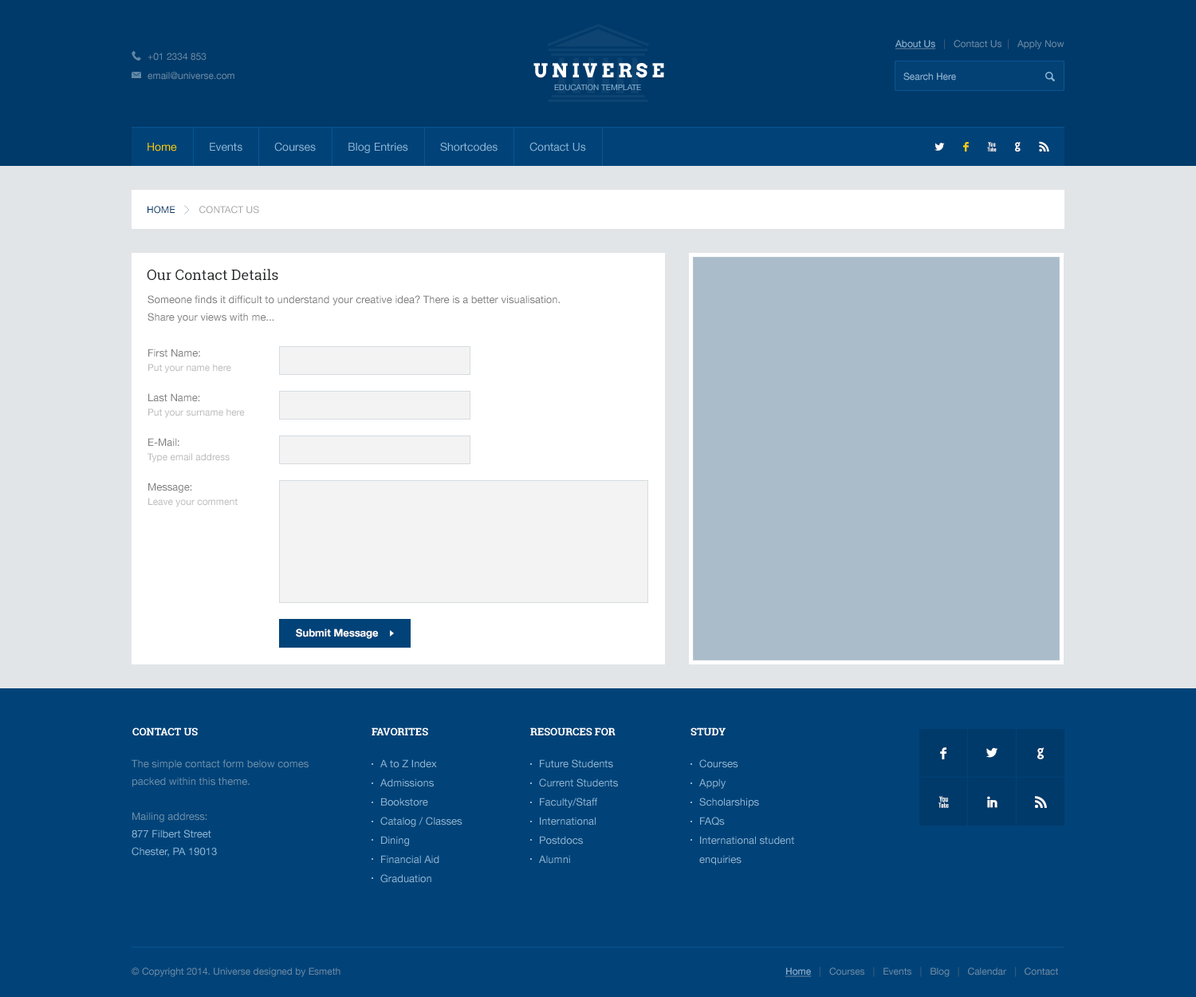
<style>
.page{position:relative;width:1196px;height:997px;background:#014379}
.page>*{position:absolute;margin:0}
.t1{font:9.6px "HelveticaNeue";color:#6289a7}
.t2{font:9.6px "HelveticaNeue";color:#8ab5d6;text-decoration:underline}
.t3{font:9.6px "HelveticaNeue";color:#44647c}
.t4{font:19.1px "Arvo-Bold";letter-spacing:0.2em;color:#ffffff}
.t5{font:9.6px "HelveticaNeue";color:#8ab5d6}
.t6{font:8px "HelveticaNeue";color:#8ab5d6}
.t7{font:11.2px "HelveticaNeue";color:#fecd0b}
.t8{font:11.2px "HelveticaNeue";color:#8ab5d6}
.t9{font:15.9px "Socialico";letter-spacing:1.1em;color:#ffffff}
.t10{font:15.9px "Socialico";letter-spacing:1.1em;color:#fecd0b}
.t11{font:9.6px "HelveticaNeue";color:#aaaaaa}
.t12{font:9.6px "HelveticaNeue";color:#003a6a}
.t13{font:14.4px "RobotoSlab-Regular";color:#282a2c}
.t14{font:10.4px/17.5px "HelveticaNeue";color:#808080}
.t15{font:9.6px/14.4px "HelveticaNeue";color:#bcbcbc}
.t16{font:10.4px/14.4px "HelveticaNeue";color:#808080}
.t17{font:10.4px "HelveticaNeue-Bold";color:#ffffff}
.t18{font:10.4px "RobotoSlab-Bold";color:#ffffff;text-transform:uppercase}
.t19{font:19.1px "Socialico";color:#ffffff;text-transform:uppercase}
.t20{font:10.4px/17.5px "HelveticaNeue";color:#6b90ad}
.t21{font:10.4px/17.5px "HelveticaNeue";color:#8ab5d6}
.t22{font:10.4px/19.1px "HelveticaNeue";color:#8ab5d6}
</style>
<div class="page">
<p class="t1" style="left:896px;top:39px;width:169px;height:10px"><span class="t2">About Us  </span><span class="t3"> |   </span>Contact Us <span class="t3"> | </span>  Apply Now</p>
<p class="t1" style="left:148px;top:53px;width:59px;height:8px">+01 2334 853</p>
<p class="t4" style="left:534px;top:63px;width:130px;height:15px">UNIVERSE</p>
<p class="t1" style="left:148px;top:72px;width:86px;height:8px">email@universe.com</p>
<p class="t5" style="left:904px;top:73px;width:52px;height:8px">Search Here</p>
<p class="t6" style="left:554px;top:84px;width:87px;height:7px">EDUCATION TEMPLATE</p>
<p class="t7" style="left:148px;top:143px;width:29px;height:9px">Home</p>
<p class="t8" style="left:210px;top:143px;width:32px;height:9px">Events</p>
<p class="t8" style="left:274px;top:142px;width:42px;height:10px">Courses</p>
<p class="t8" style="left:348px;top:143px;width:60px;height:10px">Blog Entries</p>
<p class="t8" style="left:440px;top:142px;width:58px;height:10px">Shortcodes</p>
<p class="t8" style="left:530px;top:142px;width:56px;height:10px">Contact Us</p>
<p class="t9" style="left:935px;top:141px;width:114px;height:11px">L<span class="t10">F</span>XGR</p>
<p class="t11" style="left:148px;top:206px;width:111px;height:8px"><span class="t12">HOME         </span>CONTACT US</p>
<p class="t13" style="left:147px;top:269px;width:131px;height:12px">Our Contact Details</p>
<p class="t14" style="left:148px;top:295px;width:412px;height:28px">Someone finds it difficult to understand your creative idea? There is a better visualisation.<br>Share your views with me...</p>
<p class="t15" style="left:148px;top:348px;width:83px;height:25px"><span class="t16">First Name:<br></span>Put your name here</p>
<p class="t15" style="left:148px;top:393px;width:97px;height:25px"><span class="t16">Last Name:<br></span>Put your surname here</p>
<p class="t15" style="left:148px;top:438px;width:82px;height:25px"><span class="t16">E-Mail:<br></span>Type email address</p>
<p class="t15" style="left:148px;top:482px;width:90px;height:25px"><span class="t16">Message:<br></span>Leave your comment</p>
<p class="t17" style="left:296px;top:628px;width:82px;height:11px">Submit Message</p>
<p class="t18" style="left:132px;top:727px;width:66px;height:9px">Contact us</p>
<p class="t18" style="left:372px;top:727px;width:56px;height:9px">favorites</p>
<p class="t18" style="left:530px;top:727px;width:86px;height:9px">resources for</p>
<p class="t18" style="left:691px;top:727px;width:35px;height:9px">STUDY</p>
<p class="t19" style="left:940px;top:747px;width:7px;height:12px">F</p>
<p class="t19" style="left:986px;top:747px;width:12px;height:11px">L</p>
<p class="t19" style="left:1038px;top:747px;width:6px;height:12px">G</p>
<p class="t20" style="left:132px;top:759px;width:177px;height:97px">The simple contact form below comes packed within this theme. <br><br>Mailing address:<br><span class="t21">877 Filbert Street<br>Chester, PA 19013</span></p>
<p class="t22" style="left:380px;top:759px;width:83px;height:124px">A to Z Index<br>Admissions<br>Bookstore<br>Catalog / Classes<br>Dining<br>Financial Aid<br>Graduation</p>
<p class="t22" style="left:539px;top:759px;width:79px;height:105px">Future Students<br>Current Students<br>Faculty/Staff<br>International<br>Postdocs<br>Alumni</p>
<p class="t22" style="left:699px;top:759px;width:95px;height:106px">Courses<br>Apply<br>Scholarships<br>FAQs<br>International student enquiries</p>
<p class="t19" style="left:939px;top:796px;width:10px;height:12px">X</p>
<p class="t19" style="left:987px;top:796px;width:11px;height:12px">I</p>
<p class="t19" style="left:1035px;top:796px;width:12px;height:12px">R</p>
<p class="t1" style="left:132px;top:967px;width:209px;height:10px">© Copyright 2014. Universe designed by Esmeth</p>
<p class="t1" style="left:786px;top:967px;width:272px;height:10px"><span class="t2">Home  </span><span class="t3"> |   </span>Courses  <span class="t3"> | </span>  Events  <span class="t3"> | </span>  Blog  <span class="t3"> | </span>  Calendar  <span class="t3"> | </span>  Contact</p>
</div>
